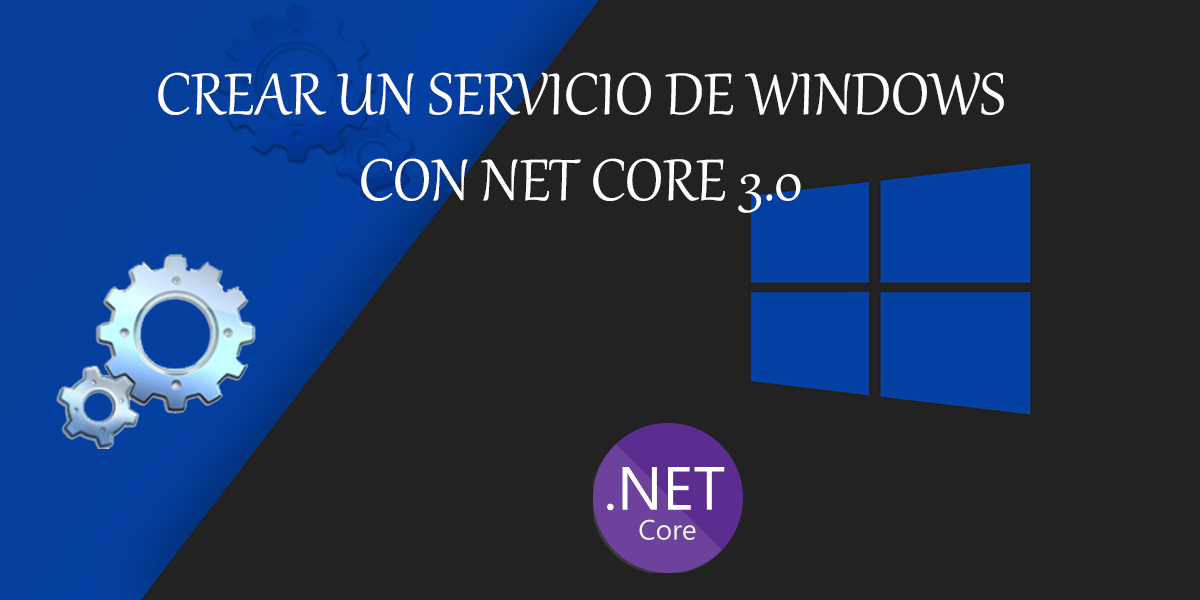
<style>
.page{position:relative;width:1200px;height:600px;background:#222222}
.page>*{position:absolute;margin:0}
.t1{font:72px "Gabriola";color:#ffffff}
</style>
<div class="page">
<p class="t1" style="left:158px;top:72px;width:846px;height:141px;text-align:center">CREAR UN SERVICIO DE WINDOWS<br>CON NET CORE 3.0</p>
</div>
